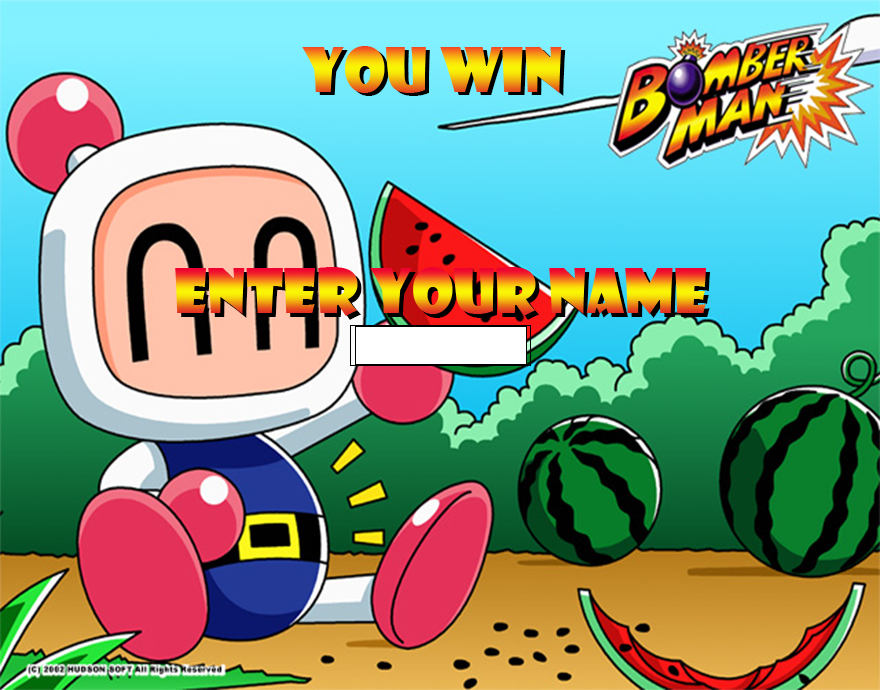
<style>
.page{position:relative;width:880px;height:690px}
.page>*{position:absolute;margin:0}
.t1{font:60px "ShowcardGothic-Reg"}
</style>
<div class="page">
<p class="t1" style="left:306px;top:49px;width:260px;height:47px">you win</p>
<p class="t1" style="left:179px;top:271px;width:531px;height:49px">enter your name</p>
</div>
